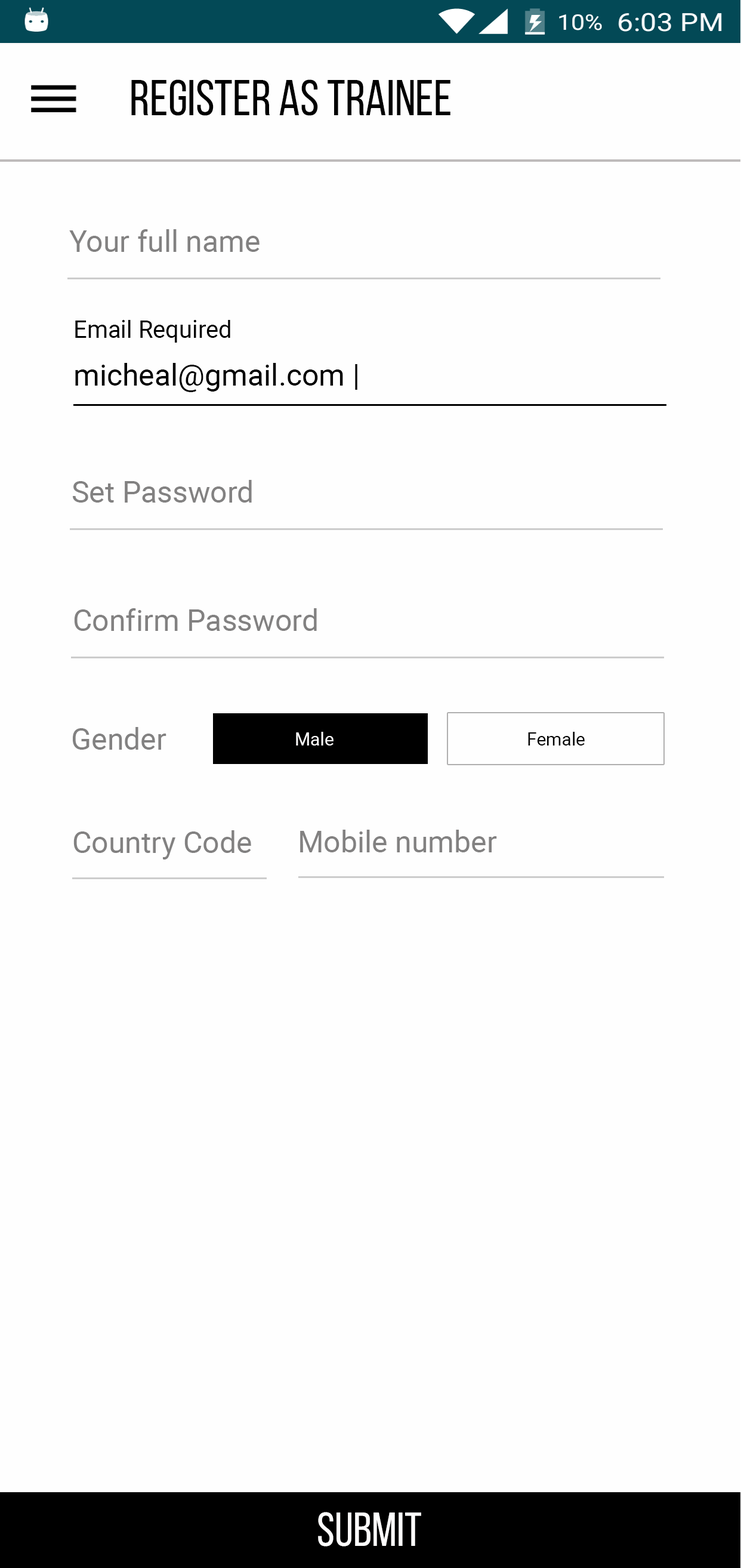
<style>
.page{position:relative;width:741px;height:1568px;background:#fefefe}
.page>*{position:absolute;margin:0}
.t1{font:50.7px "BebasNeueRegular";color:#010101}
.t2{font:29.8px "Roboto-Regular";color:#828181}
.t3{font:23.9px "Roboto-Regular";color:#000000}
.t4{font:29.8px "Roboto-Regular";color:#000000}
.t5{font:17.9px "Roboto-Regular";color:#fdfcfc}
.t6{font:17.9px "Roboto-Regular";color:#000000}
.t7{font:47.8px "BebasNeueRegular";color:#fefdfd}
</style>
<div class="page">
<p class="t1" style="left:131px;top:79px;width:320px;height:37px">REGISTER AS Trainee</p>
<p class="t2" style="left:69px;top:229px;width:191px;height:23px">Your full name</p>
<p class="t3" style="left:75px;top:320px;width:155px;height:23px">Email Required</p>
<p class="t4" style="left:75px;top:363px;width:283px;height:29px">micheal@gmail.com |</p>
<p class="t2" style="left:73px;top:480px;width:179px;height:23px">Set Password</p>
<p class="t2" style="left:74px;top:608px;width:243px;height:23px">Confirm Password</p>
<p class="t2" style="left:73px;top:727px;width:94px;height:23px">Gender</p>
<p class="t5" style="left:296px;top:732px;width:38px;height:14px">Male</p>
<p class="t6" style="left:528px;top:732px;width:57px;height:14px">Female</p>
<p class="t2" style="left:73px;top:830px;width:178px;height:30px">Country Code</p>
<p class="t2" style="left:300px;top:830px;width:197px;height:22px">Mobile number</p>
<p class="t7" style="left:318px;top:1512px;width:103px;height:35px">SUBMIT</p>
</div>
